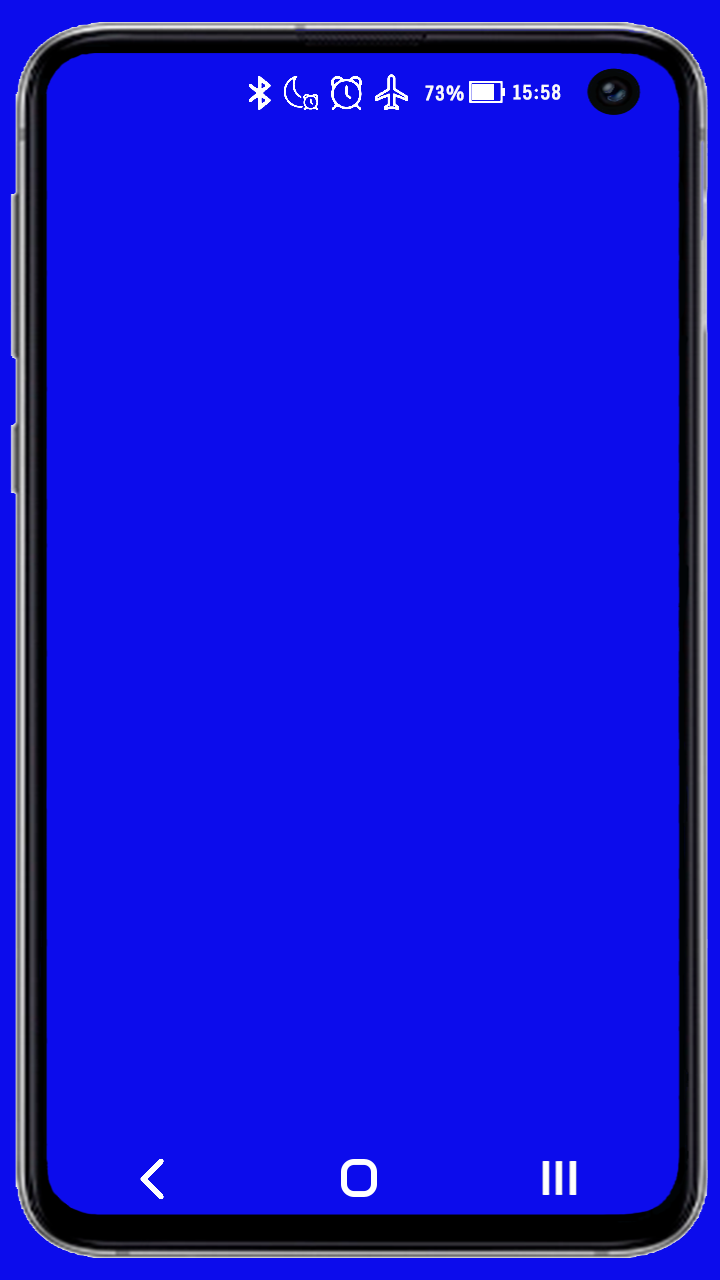
<style>
.page{position:relative;width:720px;height:1280px;background:#0c0cec}
.page>*{position:absolute;margin:0}
.t1{font:36px "KommonGroteskCom-Regular";color:#fafafa;font-weight:bold}
</style>
<div class="page">
<p class="t1" style="left:425px;top:85px;width:39px;height:16px">73%</p>
<p class="t1" style="left:513px;top:84px;width:48px;height:16px">15:58</p>
</div>
